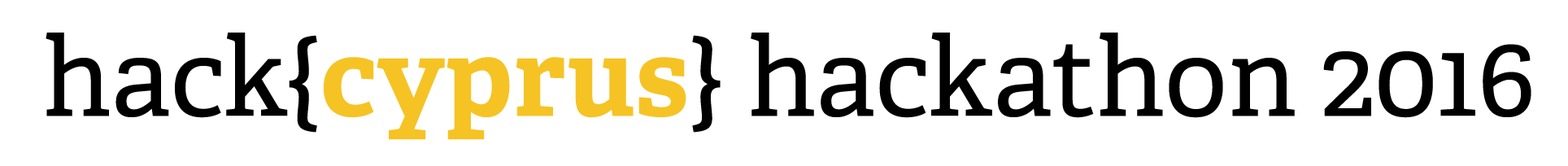
<style>
.page{position:relative;width:1568px;height:166px;background:#ffffff}
.page>*{position:absolute;margin:0}
.t1{font:110.2px "Adelle-Regular";color:#000000}
.t2{font:110.2px "Adelle-Bold";color:#f6c324}
</style>
<div class="page">
<p class="t1" style="left:46px;top:33px;width:1485px;height:107px">hack{<span class="t2">cyprus</span>} hackathon 2016</p>
</div>
